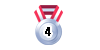
<style>
.page{position:relative;width:100px;height:50px;background:#ffffff}
.page>*{position:absolute;margin:0}
.t1{font:12px "Dotum";color:#000000;font-weight:bold}
</style>
<div class="page">
<p class="t1" style="left:45px;top:27px;width:6px;height:9px">4</p>
</div>
